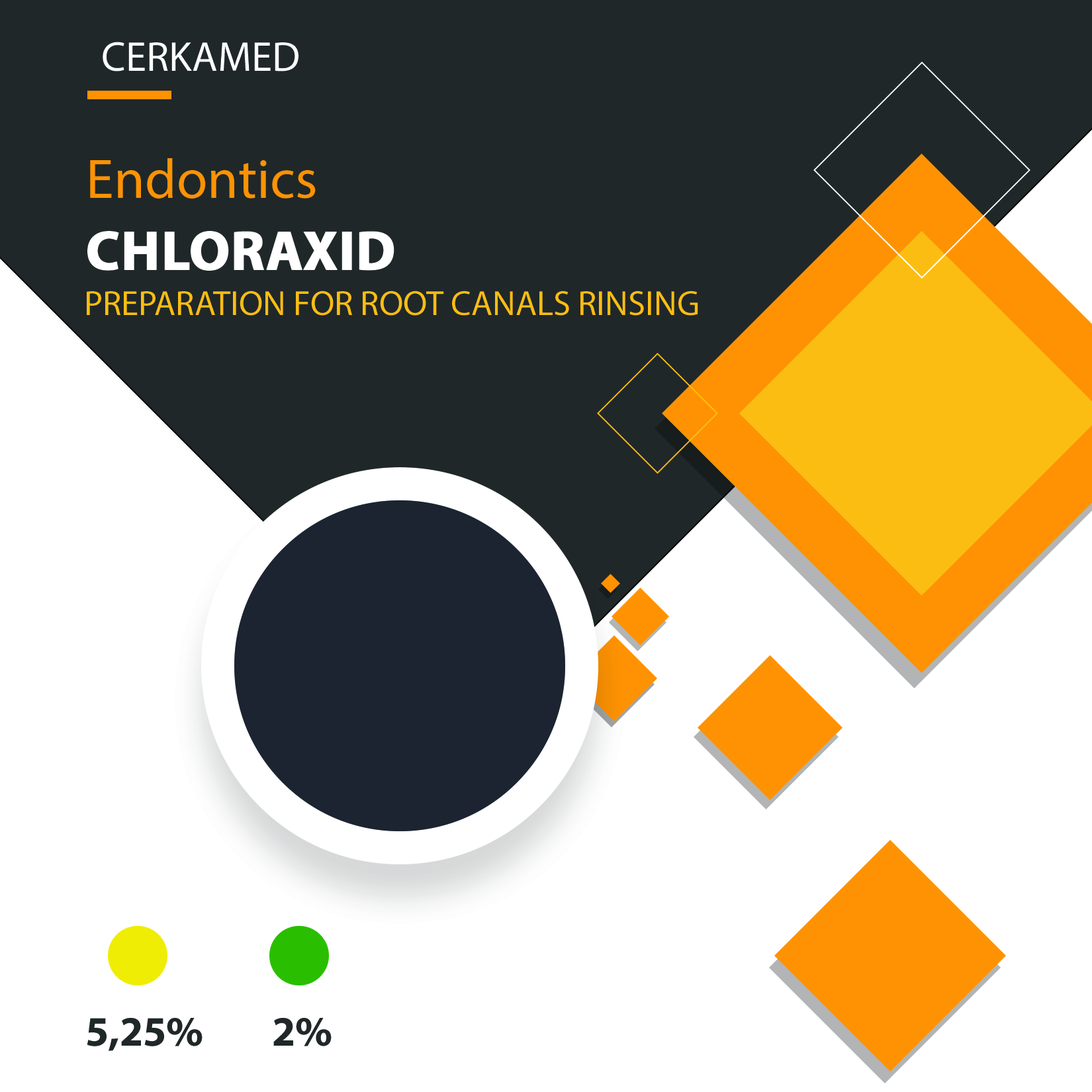
<style>
.page{position:relative;width:1092px;height:1092px;background:#ffffff}
.page>*{position:absolute;margin:0}
.t1{font:42px "MyriadPro-Regular";color:#ffffff;text-transform:uppercase}
.t2{font:56px "MyriadPro-Regular";color:#fe9202}
.t3{font:56px "MyriadPro-Bold";color:#ffffff;text-transform:uppercase;font-weight:bold}
.t4{font:35px "MyriadPro-Regular";color:#fcbd12;text-transform:uppercase}
.t5{font:42px "MyriadPro-Bold";color:#202728}
</style>
<div class="page">
<p class="t1" style="left:103px;top:42px;width:195px;height:29px">cerkamed</p>
<p class="t2" style="left:90px;top:158px;width:226px;height:41px">Endontics</p>
<p class="t3" style="left:87px;top:231px;width:307px;height:40px">CHLORAXID</p>
<p class="t4" style="left:87px;top:291px;width:611px;height:25px">PREPARATION for root canals rinsing</p>
<p class="t5" style="left:87px;top:1018px;width:116px;height:33px">5,25%</p>
<p class="t5" style="left:273px;top:1018px;width:59px;height:28px">2%</p>
</div>
